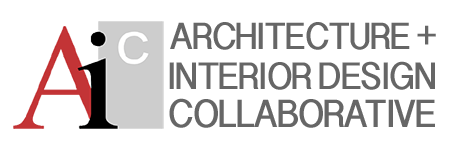
<style>
.page{position:relative;width:450px;height:150px;background:#ffffff}
.page>*{position:absolute;margin:0}
.t1{font:37.4px "DevanagariSangamMN-Bold";letter-spacing:-0.025em;color:#666666;scale:0.92 1}
.t2{font:37.6px "DevanagariSangamMN-Bold";letter-spacing:-0.025em;color:#666666;scale:0.93 1}
.t3{font:38.9px "DevanagariSangamMN-Bold";letter-spacing:-0.025em;color:#666666;scale:0.91 1}
</style>
<div class="page">
<p class="t1" style="left:170px;top:22px;width:266px;height:28px">ARCHITECTURE +</p>
<p class="t2" style="left:169px;top:61px;width:266px;height:29px">INTERIOR DESIGN</p>
<p class="t3" style="left:169px;top:98px;width:266px;height:30px">COLLABORATIVE</p>
</div>
